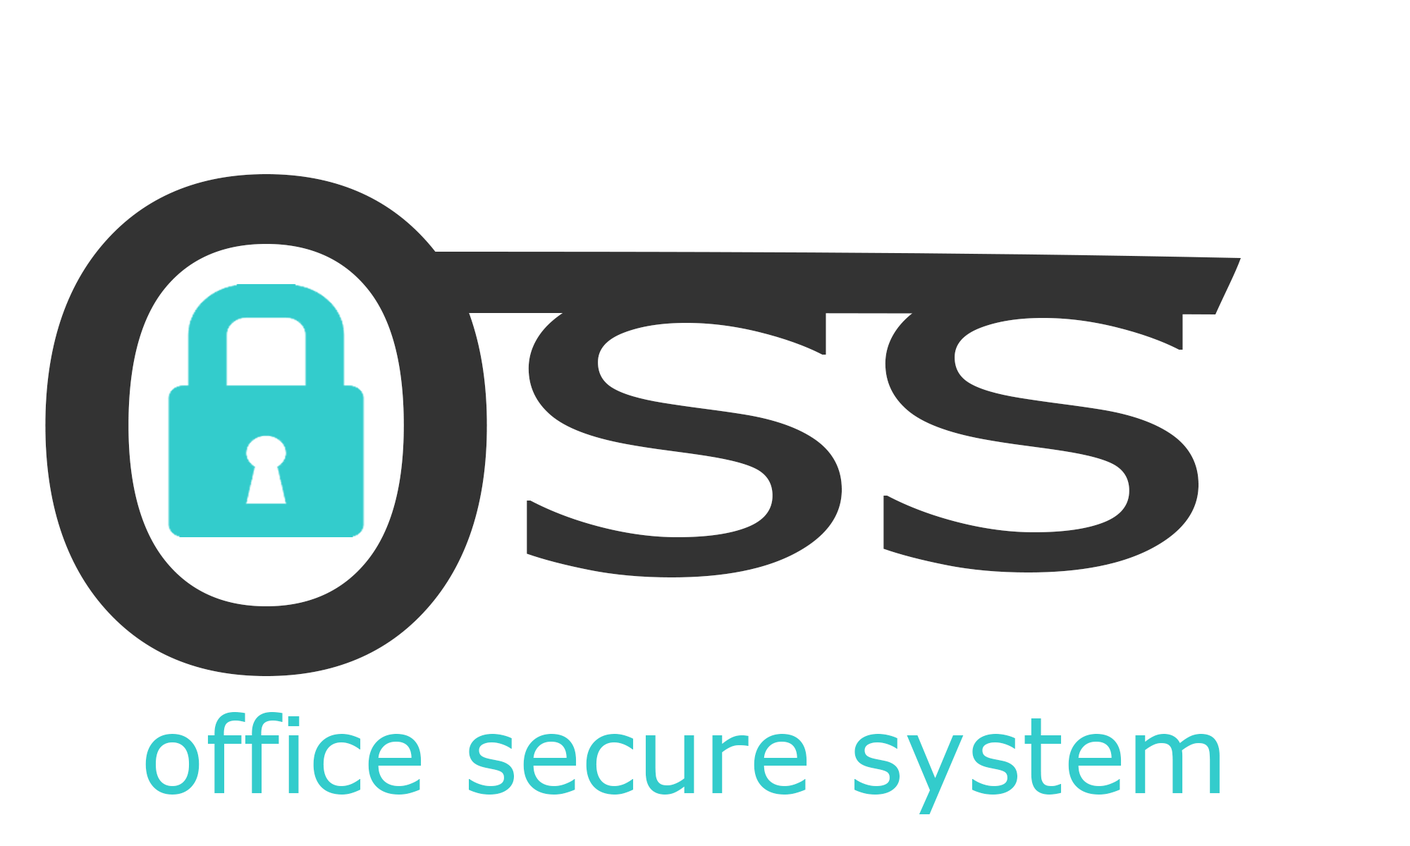
<style>
.page{position:relative;width:1410px;height:846px;background:#ffffff}
.page>*{position:absolute;margin:0}
.t1{font:871.4px "MSReferenceSansSerif";color:#333333}
.t2{font:516.8px "MSReferenceSansSerif";color:#333333;scale:1.43 1}
.t3{font:105.7px "MSReferenceSansSerif";color:#33cccc}
</style>
<div class="page">
<p class="t1" style="left:45px;top:173px;width:442px;height:503px">o</p>
<p class="t2" style="left:527px;top:282px;width:315px;height:295px">s</p>
<p class="t2" style="left:883px;top:277px;width:315px;height:295px">s</p>
<p class="t3" style="left:145px;top:712px;width:1074px;height:102px">office secure system</p>
</div>
